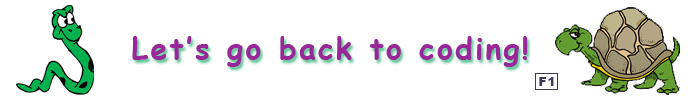
<style>
.page{position:relative;width:700px;height:100px;background:#ffffff}
.page>*{position:absolute;margin:0}
.t1{font:30px "ComicSansMS-Bold";letter-spacing:0.075em;color:#982797}
.t2{font:12px "Arial-Black";letter-spacing:0.075em;color:#3d375c}
</style>
<div class="page">
<p class="t1" style="left:132px;top:36px;width:395px;height:31px">Let’s go back to coding!</p>
<p class="t2" style="left:539px;top:77px;width:15px;height:9px">F1</p>
</div>
